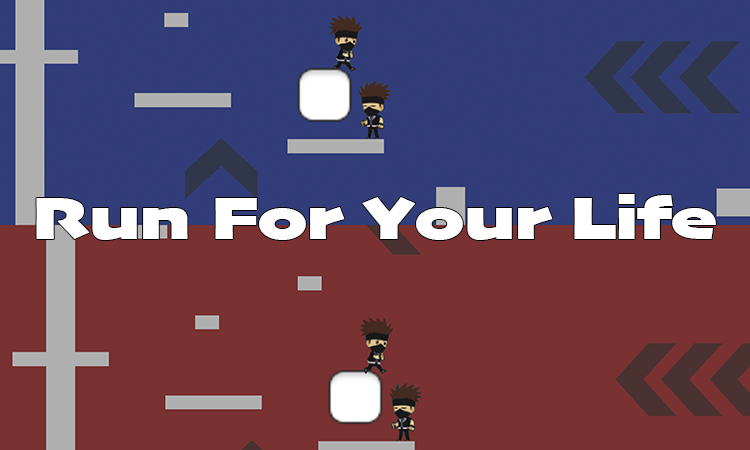
<style>
.page{position:relative;width:750px;height:450px;background:#793131}
.page>*{position:absolute;margin:0}
.t1{font:62.5px "Skia-BlackExtended";color:#ffffff}
</style>
<div class="page">
<p class="t1" style="left:36px;top:194px;width:680px;height:46px">Run For Your Life</p>
</div>
